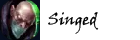
<style>
.page{position:relative;width:140px;height:40px;background:#ffffff}
.page>*{position:absolute;margin:0}
.t1{font:12px "VinerHandITC";color:#000000}
</style>
<div class="page">
<p class="t1" style="left:48px;top:12px;width:51px;height:22px">Singed</p>
</div>
